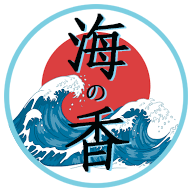
<style>
.page{position:relative;width:193px;height:193px;background:#ffffff}
.page>*{position:absolute;margin:0}
.t1{font:68.2px "AdobeFangsongStd-Regular";color:#000506;font-weight:bold}
.t2{font:68.2px "AdobeFangsongStd-Regular";font-weight:bold}
.t3{font:20.4px "AdobeFangsongStd-Regular";color:#000506;font-weight:bold}
.t4{font:20.4px "AdobeFangsongStd-Regular";color:#87d9f7;font-weight:bold}
</style>
<div class="page">
<p class="t1" style="left:67px;top:13px;width:62px;height:67px">海</p>
<p class="t2" style="left:69px;top:14px;width:62px;height:67px">海</p>
<p class="t3" style="left:86px;top:85px;width:19px;height:16px">の</p>
<p class="t4" style="left:88px;top:86px;width:19px;height:16px">の</p>
<p class="t1" style="left:65px;top:106px;width:65px;height:66px">香</p>
<p class="t2" style="left:67px;top:107px;width:65px;height:66px">香</p>
</div>
